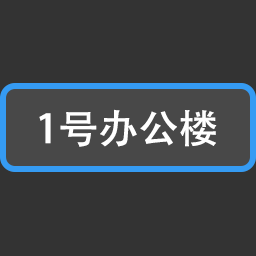
<style>
.page{position:relative;width:256px;height:256px;background:#333333}
.page>*{position:absolute;margin:0}
.t1{font:39px "AdobeHeitiStd-Regular";color:#ffffff;font-weight:bold}
</style>
<div class="page">
<p class="t1" style="left:39px;top:109px;width:178px;height:38px">1号办公楼</p>
</div>
